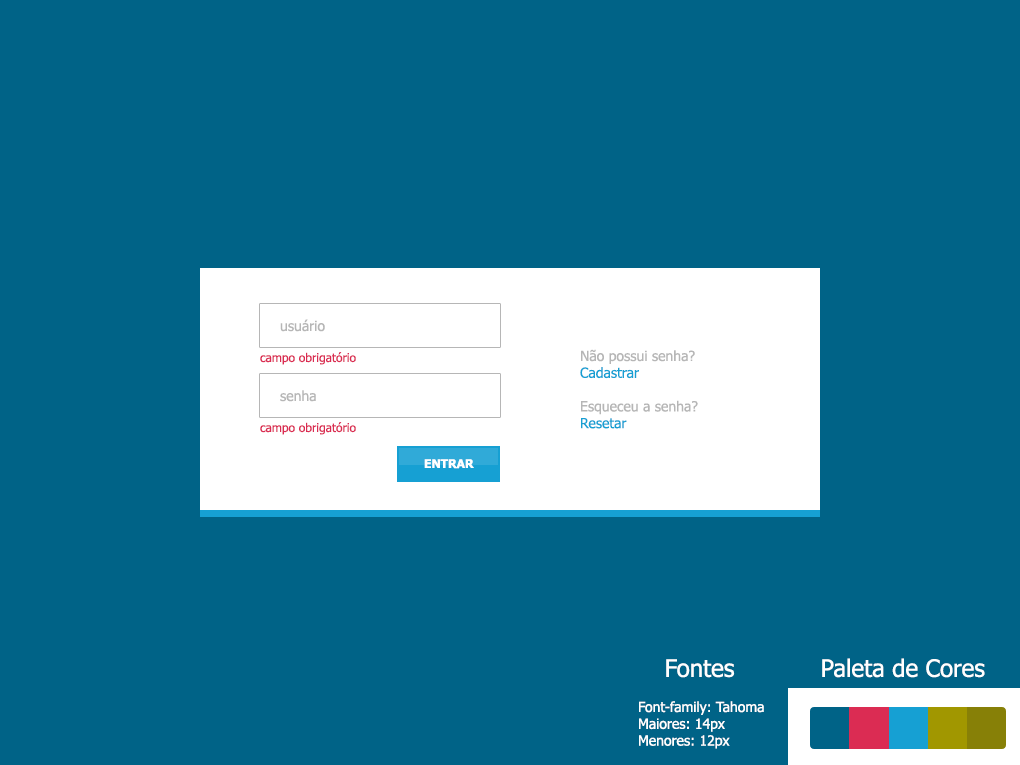
<style>
.page{position:relative;width:1020px;height:765px;background:#006387}
.page>*{position:absolute;margin:0}
.t1{font:14px "Tahoma";color:#b6b6b6}
.t2{font:12px "Tahoma";color:#db2c53}
.t3{font:14px "Tahoma";color:#16a0d3}
.t4{font:12px "Tahoma-Bold";color:#ffffff}
.t5{font:24px "Tahoma";color:#ffffff}
.t6{font:14px "Tahoma";color:#ffffff}
</style>
<div class="page">
<p class="t1" style="left:280px;top:319px;width:45px;height:13px">usuário</p>
<p class="t2" style="left:260px;top:352px;width:96px;height:13px">campo obrigatório</p>
<p class="t1" style="left:580px;top:349px;width:118px;height:80px">Não possui senha?<br><span class="t3">Cadastrar<br></span><br>Esqueceu a senha?<br><span class="t3">Resetar</span></p>
<p class="t1" style="left:280px;top:390px;width:36px;height:12px">senha</p>
<p class="t2" style="left:260px;top:422px;width:96px;height:13px">campo obrigatório</p>
<p class="t4" style="left:424px;top:459px;width:50px;height:10px">ENTRAR</p>
<p class="t5" style="left:666px;top:659px;width:69px;height:19px">Fontes</p>
<p class="t5" style="left:822px;top:658px;width:163px;height:20px">Paleta de Cores</p>
<p class="t6" style="left:639px;top:701px;width:125px;height:48px">Font-family: Tahoma<br>Maiores: 14px<br>Menores: 12px</p>
</div>
